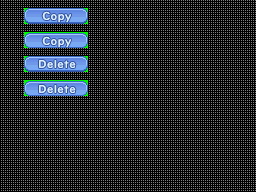
<style>
.page{position:relative;width:256px;height:192px;background:#000000}
.page>*{position:absolute;margin:0}
.t1{font:10.7px/24px "UDDigiKyokashoNK-Bold";letter-spacing:0.05em;color:#e2eeff}
.t2{font:10.7px/23.3px "UDDigiKyokashoNK-Bold";letter-spacing:0.05em;color:#e2eeff}
</style>
<div class="page">
<p class="t1" style="left:39px;top:11px;width:37px;height:82px;text-align:center"><span class="t2">Copy<br></span>Copy<br>Delete<br>Delete</p>
</div>
